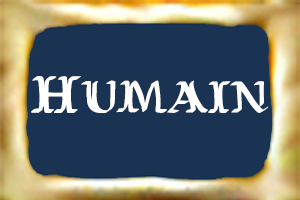
<style>
.page{position:relative;width:300px;height:200px;background:#1b3353}
.page>*{position:absolute;margin:0}
.t1{font:37.5px "WarsofAsgard";color:#ffffff}
</style>
<div class="page">
<p class="t1" style="left:31px;top:76px;width:238px;height:37px">Humain</p>
</div>
